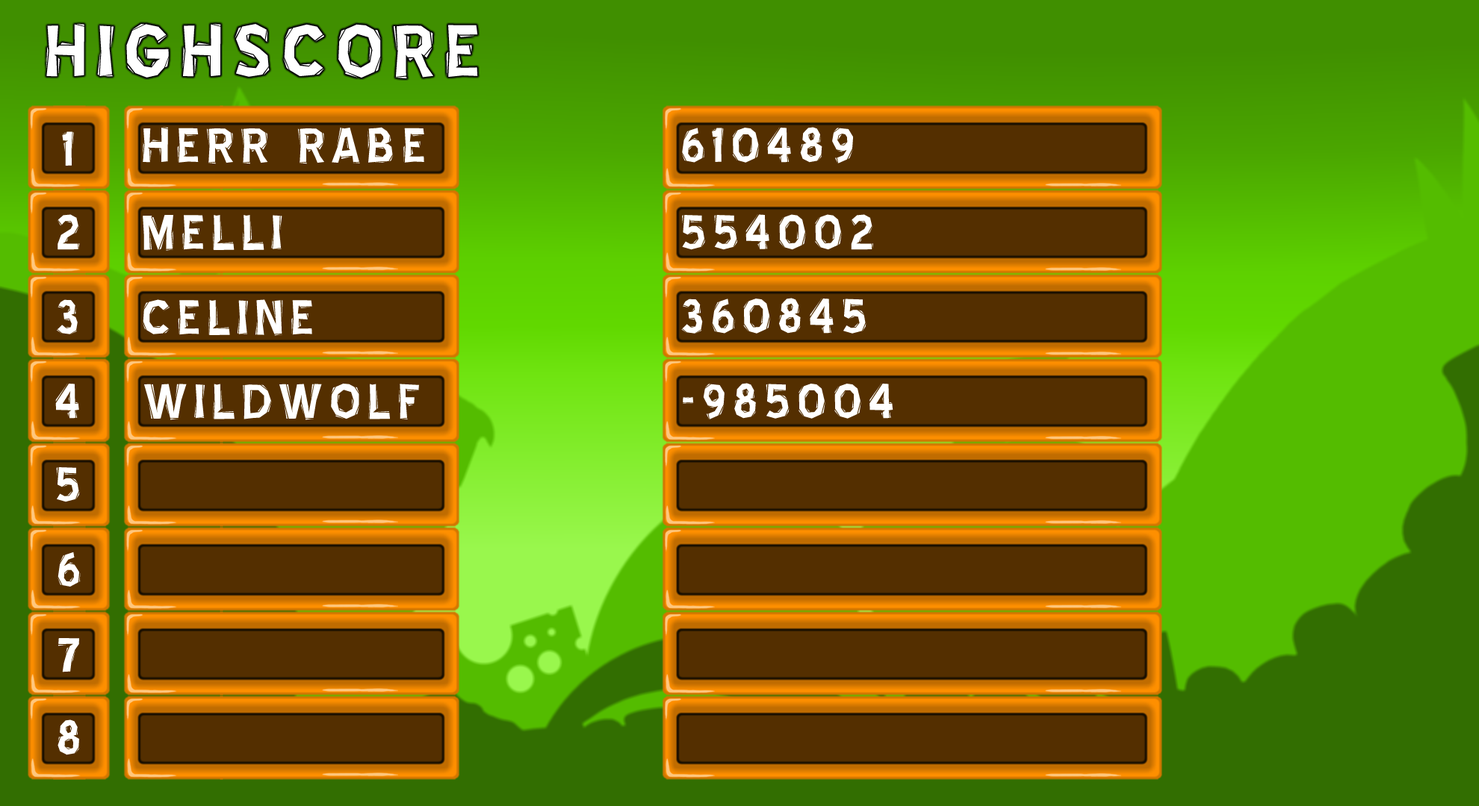
<style>
.page{position:relative;width:1479px;height:806px}
.page>*{position:absolute;margin:0}
.t1{font:59.7px "BlueHighwayLinocut";letter-spacing:0.1em;color:#ffffff}
</style>
<div class="page">
<p class="t1" style="left:62px;top:131px;width:12px;height:35px">1</p>
<p class="t1" style="left:143px;top:127px;width:281px;height:37px">HERR RABE</p>
<p class="t1" style="left:682px;top:127px;width:171px;height:37px">610489</p>
<p class="t1" style="left:57px;top:214px;width:23px;height:36px">2</p>
<p class="t1" style="left:143px;top:215px;width:139px;height:36px">MELLI</p>
<p class="t1" style="left:682px;top:214px;width:191px;height:36px">554002</p>
<p class="t1" style="left:57px;top:299px;width:21px;height:36px">3v</p>
<p class="t1" style="left:143px;top:299px;width:169px;height:37px">CELINE</p>
<p class="t1" style="left:681px;top:298px;width:185px;height:36px">360845</p>
<p class="t1" style="left:55px;top:383px;width:24px;height:36px">4</p>
<p class="t1" style="left:144px;top:384px;width:275px;height:36px">WILDWOLF</p>
<p class="t1" style="left:683px;top:383px;width:210px;height:37px">-985004</p>
<p class="t1" style="left:56px;top:467px;width:24px;height:36px">5</p>
<p class="t1" style="left:57px;top:552px;width:24px;height:35px">6</p>
<p class="t1" style="left:58px;top:638px;width:21px;height:35px">7</p>
<p class="t1" style="left:57px;top:720px;width:22px;height:36px">8</p>
</div>
